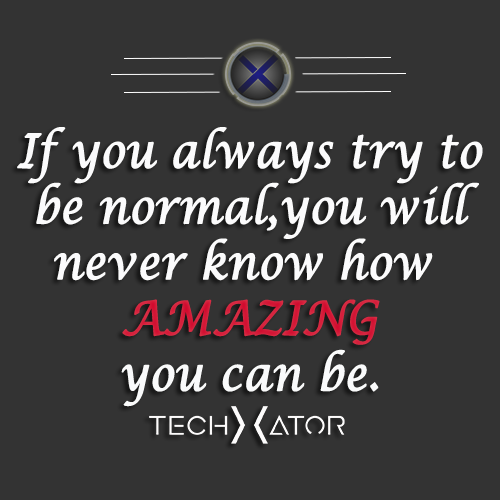
<style>
.page{position:relative;width:500px;height:500px;background:#333333}
.page>*{position:absolute;margin:0}
.t1{font:46.4px "LucidaCalligraphy-Italic";color:#fbfbfc;font-weight:bold;scale:0.89 1}
.t2{font:46.4px "LucidaCalligraphy-Italic";color:#d0072c;font-weight:bold;scale:0.89 1}
.t3{font:46.4px "LucidaCalligraphy-Italic";color:#f9fafb;font-weight:bold;scale:0.89 1}
</style>
<div class="page">
<p class="t1" style="left:17px;top:127px;width:466px;height:280px;text-align:center">If you always try to<br> be normal,you will <br>never know how <br><span class="t2">AMAZING<br></span><span class="t3">you can be.</span></p>
</div>
